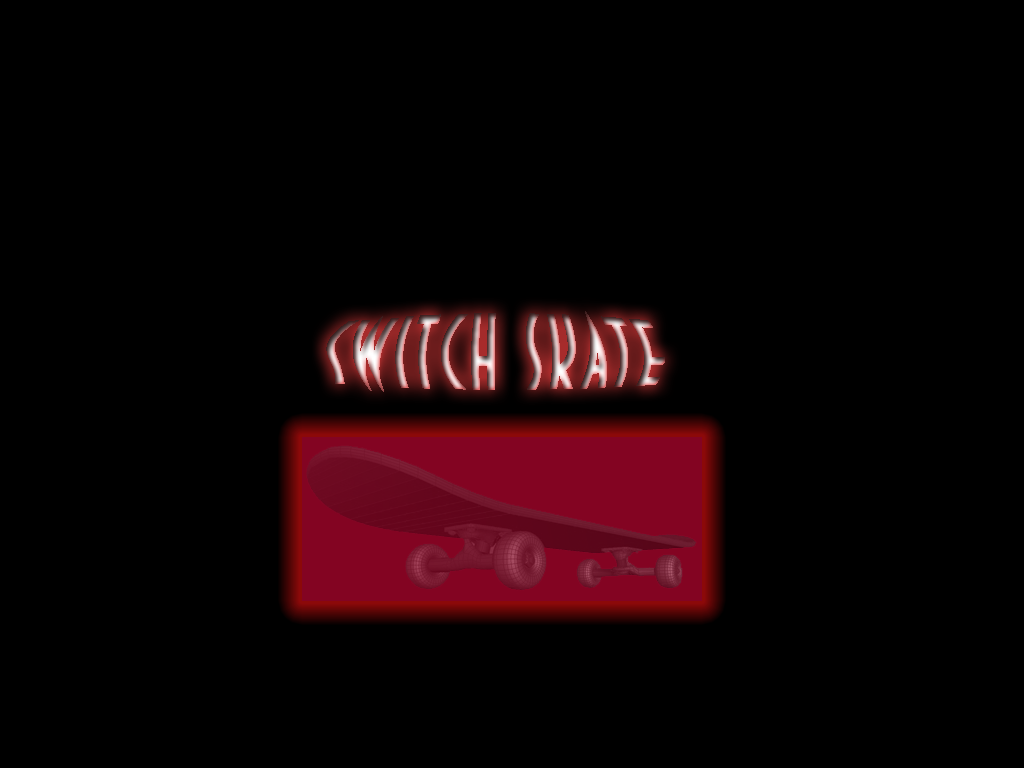
<style>
.page{position:relative;width:1024px;height:768px;background:#000000}
.page>*{position:absolute;margin:0}
.t1{font:86.4px "DecoTechTL";letter-spacing:0.05em;scale:0.83 1}
</style>
<div class="page">
<p class="t1" style="left:326px;top:311px;width:339px;height:81px">Switch Skate</p>
</div>
